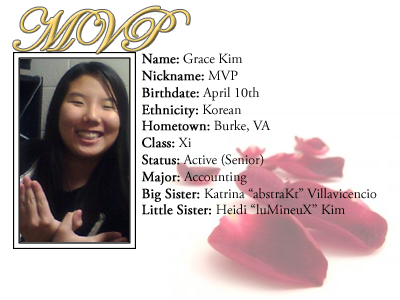
<style>
.page{position:relative;width:400px;height:300px;background:#ffffff}
.page>*{position:absolute;margin:0}
.t1{font:60px "EdwardianScriptITC";font-weight:bold}
.t2{font:14px "AGaramondPro-Regular";color:#000000}
.t3{font:14px "AGaramondPro-Regular";color:#000000;font-weight:bold}
</style>
<div class="page">
<p class="t1" style="left:13px;top:6px;width:177px;height:48px">MVP</p>
<p class="t2" style="left:141px;top:53px;width:236px;height:162px"><span class="t3">Name:</span> Grace Kim<br><span class="t3">Nickname:</span> MVP<br><span class="t3">Birthdate:</span> April 10th<br><span class="t3">Ethnicity:</span> Korean<br><span class="t3">Hometown:</span> Burke, VA<br><span class="t3">Class:</span> Xi<br><span class="t3">Status:</span> Active (Senior)<br><span class="t3">Major:</span> Accounting<br><span class="t3">Big Sister: </span>Katrina “abstraKt” Villavicencio<br><span class="t3">Little Sister: </span>Heidi “luMineuX” Kim</p>
</div>
